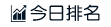
<style>
.page{position:relative;width:111px;height:27px;background:#ffffff}
.page>*{position:absolute;margin:0}
.t1{font:17px "FZY3JW--GB1-0";letter-spacing:0.05em;color:#00101e}
</style>
<div class="page">
<p class="t1" style="left:30px;top:4px;width:70px;height:17px">今日排名</p>
</div>
